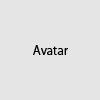
<style>
.page{position:relative;width:100px;height:100px;background:#e5e5e5}
.page>*{position:absolute;margin:0}
.t1{font:12px "KozGoPro-Regular";color:#000000}
</style>
<div class="page">
<p class="t1" style="left:33px;top:45px;width:35px;height:10px">Avatar</p>
</div>
